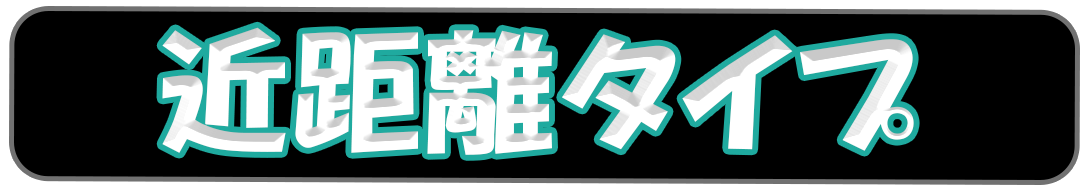
<style>
.page{position:relative;width:1089px;height:192px;background:#000000}
.page>*{position:absolute;margin:0}
.t1{font:130.2px "HGPSoeiKakupoptai";letter-spacing:0.025em;color:#ffffff}
</style>
<div class="page">
<p class="t1" style="left:162px;top:27px;width:752px;height:128px">近距離タイプ</p>
</div>
